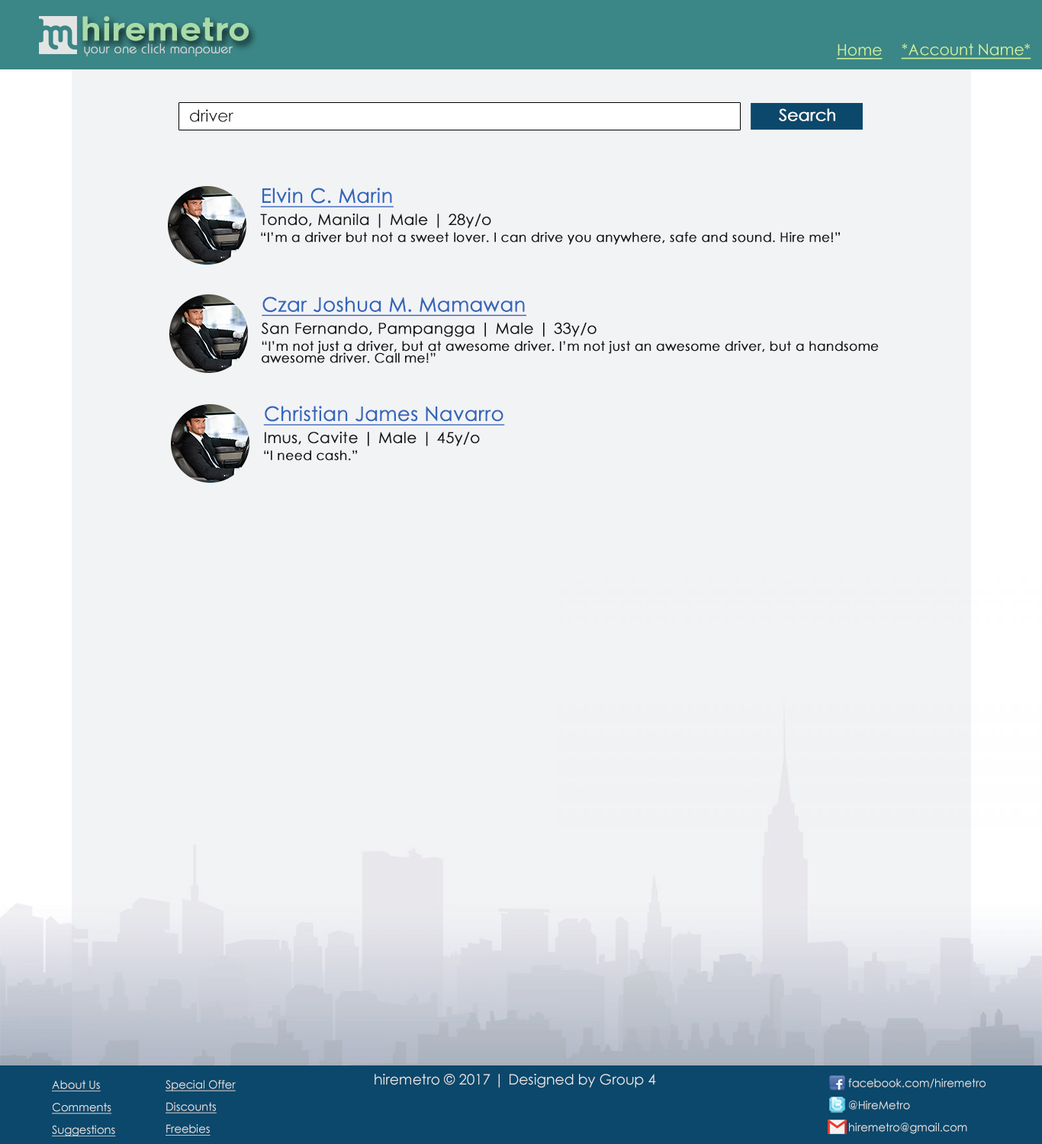
<style>
.page{position:relative;width:1042px;height:1144px;background:#f2f3f5}
.page>*{position:absolute;margin:0}
.t1{font:32.1px "Renogare-Regular";color:#a8dba8}
.t2{font:13.4px "Brie-Light";color:#d5d5d5;font-weight:bold}
.t3{font:15.7px "CenturyGothic";color:#cff09e;text-decoration:underline}
.t4{font:16.4px "CenturyGothic";color:#171717}
.t5{font:16.2px "CenturyGothic";color:#ffffff;font-weight:bold}
.t6{font:19.6px "CenturyGothic";color:#3366bb;font-weight:bold;text-decoration:underline}
.t7{font:15.1px "CenturyGothic";color:#171717;font-weight:bold}
.t8{font:13px "CenturyGothic";color:#171717;font-weight:bold}
.t9{font:13px/11.9px "CenturyGothic";color:#171717;font-weight:bold}
.t10{font:11.3px/22.5px "CenturyGothic";color:#e4e4e4;text-decoration:underline}
.t11{font:11.1px/22.2px "CenturyGothic";color:#e4e4e4;text-decoration:underline}
.t12{font:14.3px "CenturyGothic";color:#e4e4e4}
.t13{font:11.1px/22.2px "CenturyGothic";color:#e4e4e4}
</style>
<div class="page">
<p class="t1" style="left:82px;top:16px;width:167px;height:25px">hiremetro</p>
<p class="t2" style="left:84px;top:43px;width:149px;height:13px">your one click manpower</p>
<p class="t3" style="left:837px;top:44px;width:46px;height:16px">Home</p>
<p class="t3" style="left:901px;top:43px;width:130px;height:17px">*Account Name*</p>
<p class="t4" style="left:190px;top:109px;width:43px;height:13px">driver</p>
<p class="t5" style="left:779px;top:108px;width:56px;height:13px">Search</p>
<p class="t6" style="left:260px;top:188px;width:134px;height:19px">Elvin C. Marin</p>
<p class="t7" style="left:260px;top:214px;width:231px;height:14px">Tondo, Manila | Male | 28y/o</p>
<p class="t8" style="left:261px;top:232px;width:579px;height:13px">“I’m a driver but not a sweet lover. I can drive you anywhere, safe and sound. Hire me!”</p>
<p class="t6" style="left:262px;top:297px;width:264px;height:20px">Czar Joshua M. Mamawan</p>
<p class="t7" style="left:261px;top:323px;width:336px;height:14px">San Fernando, Pampangga | Male | 33y/o</p>
<p class="t9" style="left:262px;top:341px;width:617px;height:22px">“I’m not just a driver, but at awesome driver. I’m not just an awesome driver, but a handsome <br>awesome driver. Call me!”</p>
<p class="t6" style="left:263px;top:406px;width:242px;height:20px">Christian James Navarro</p>
<p class="t7" style="left:265px;top:432px;width:215px;height:14px">Imus, Cavite | Male | 45y/o</p>
<p class="t8" style="left:264px;top:450px;width:93px;height:11px">“I need cash.”</p>
<p class="t10" style="left:52px;top:1080px;width:64px;height:57px">About Us<br>Comments<br>Suggestions</p>
<p class="t11" style="left:166px;top:1080px;width:70px;height:56px">Special Offer<br>Discounts<br>Freebies</p>
<p class="t12" style="left:375px;top:1074px;width:281px;height:14px">hiremetro © 2017 | Designed by Group 4</p>
<p class="t13" style="left:848px;top:1079px;width:138px;height:55px">facebook.com/hiremetro<br>@HireMetro<br>hiremetro@gmail.com</p>
</div>
